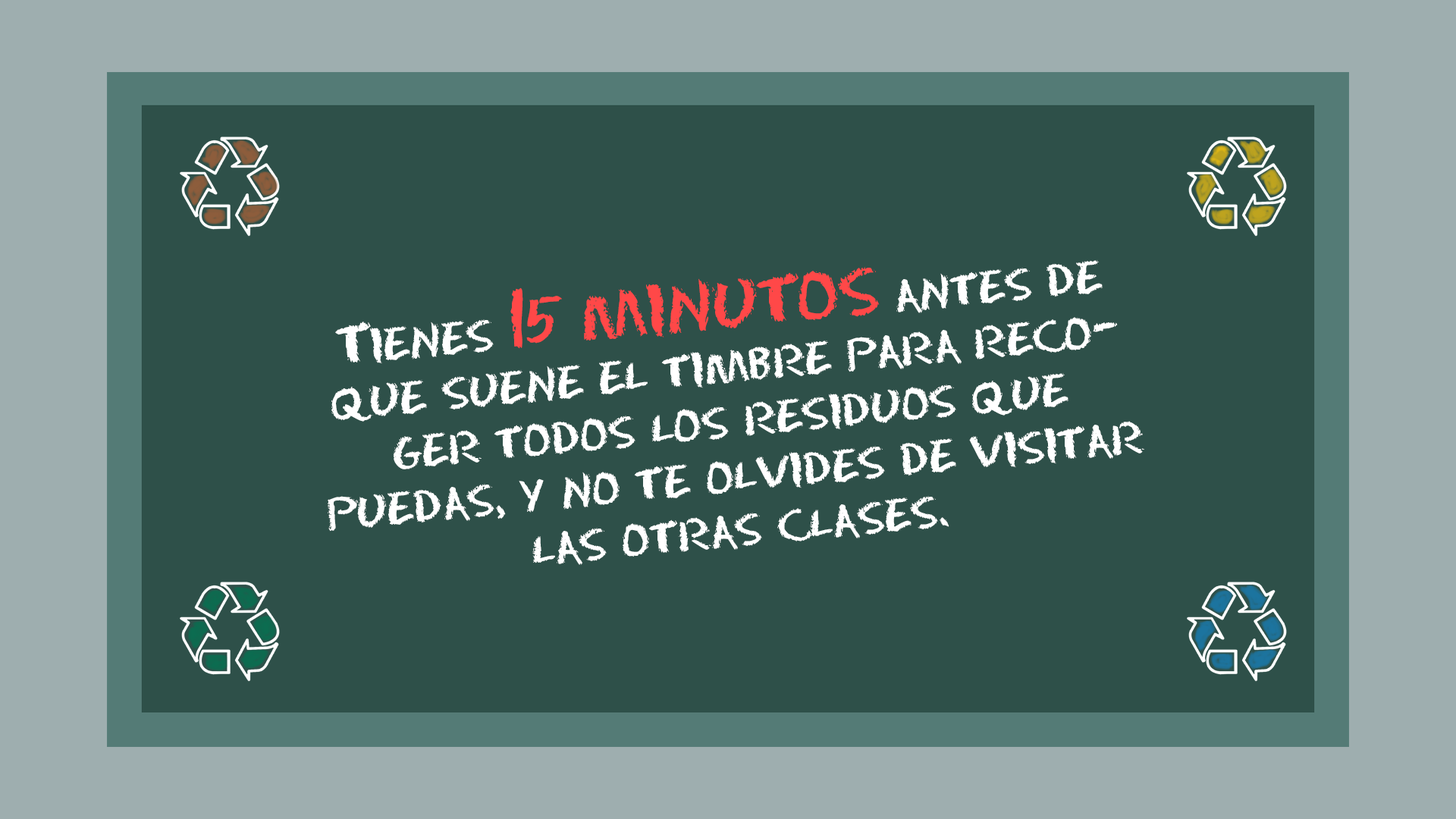
<style>
.page{position:relative;width:1456px;height:819px;background:#2e5049}
.page>*{position:absolute;margin:0}
.t1{font:45.5px "ChalkDustRegularSWFTE";color:#ffffff}
.t2{font:27.3px "ChalkDustRegularSWFTE";color:#ffffff}
.t3{font:54.6px "ChalkDustRegularSWFTE";color:#ff4848}
</style>
<div class="page">
<p class="t1" style="left:328px;top:260px;width:816px;height:305px;text-align:center;rotate:-5deg"><span class="t2"><br></span>Tienes <span class="t3">15 MINUTOS</span> antes de que suene el timbre para recoger todos los residuos que<br>puedas, y no te olvides de visitar las otras clases.</p>
</div>
